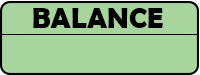
<style>
.page{position:relative;width:200px;height:75px;background:#a8d59d}
.page>*{position:absolute;margin:0}
.t1{font:29.2px "BerlinSansFBDemi-Bold";color:#000000}
</style>
<div class="page">
<p class="t1" style="left:33px;top:8px;width:130px;height:20px">BALANCE</p>
</div>
